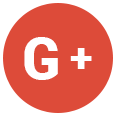
<style>
.page{position:relative;width:115px;height:115px;background:#dd4b39}
.page>*{position:absolute;margin:0}
.t1{font:58.3px "Roboto-Black";color:#ffffff}
.t2{font:41.7px "Roboto-Black";color:#ffffff}
</style>
<div class="page">
<p class="t1" style="left:24px;top:37px;width:34px;height:43px">G</p>
<p class="t2" style="left:70px;top:48px;width:22px;height:21px">+</p>
</div>
